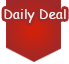
<style>
.page{position:relative;width:69px;height:64px;background:#ffffff}
.page>*{position:absolute;margin:0}
.t1{font:13px "ComicSansMS";letter-spacing:0.022em;color:#f2eded}
</style>
<div class="page">
<p class="t1" style="left:4px;top:9px;width:62px;height:14px">Daily Deal</p>
</div>
